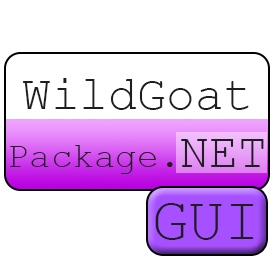
<style>
.page{position:relative;width:275px;height:275px;background:#ffffff}
.page>*{position:absolute;margin:0}
.t1{font:48px "CourierNewPSMT";color:#1e1e1e}
.t2{font:36px "CourierNewPSMT";color:#1e1e1e}
.t3{font:60px "CourierNewPSMT";color:#1e1e1e}
</style>
<div class="page">
<p class="t1" style="left:10px;top:78px;width:254px;height:96px;text-align:center">WildGoat<br><span class="t2">Package.</span>NET</p>
<p class="t3" style="left:155px;top:203px;width:99px;height:37px">GUI</p>
</div>
